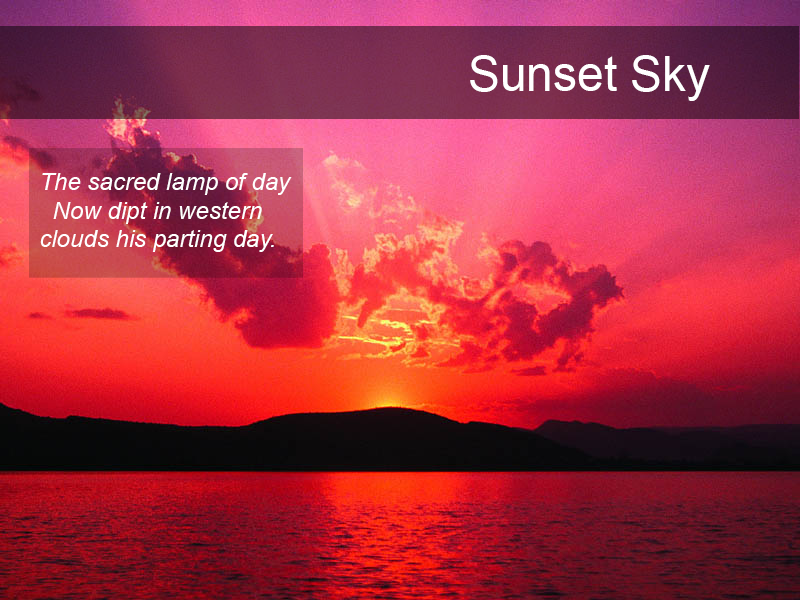
<style>
.page{position:relative;width:800px;height:600px}
.page>*{position:absolute;margin:0}
.t1{font:48px "ArialMT";color:#ffffff}
.t2{font:24px "Arial-ItalicMT";color:#ffffff}
</style>
<div class="page">
<p class="t1" style="left:470px;top:55px;width:240px;height:46px">Sunset Sky</p>
<p class="t2" style="left:40px;top:173px;width:252px;height:79px">The sacred lamp of day<br>  Now dipt in western clouds his parting day.</p>
</div>
